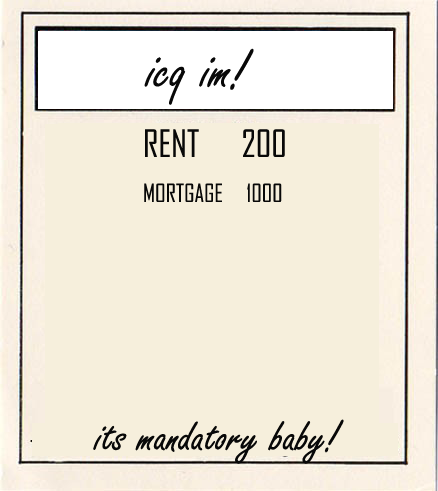
<style>
.page{position:relative;width:438px;height:491px;background:#f6efdc}
.page>*{position:absolute;margin:0}
.t1{font:60px "FreestyleScript-Regular";color:#080808}
.t2{font:36px "AgencyFB-Reg";color:#080808}
.t3{font:24px "AgencyFB-Reg";color:#080808}
</style>
<div class="page">
<p class="t1" style="left:144px;top:48px;width:110px;height:57px">icq im!</p>
<p class="t2" style="left:145px;top:129px;width:140px;height:28px">RENT      200</p>
<p class="t3" style="left:144px;top:183px;width:138px;height:19px">MORTGAGE     1000</p>
</div>
